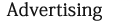
<style>
.page{position:relative;width:131px;height:22px;background:#ffffff}
.page>*{position:absolute;margin:0}
.t1{font:18px "AdobeFangsongStd-Regular";color:#151515;font-weight:bold}
</style>
<div class="page">
<p class="t1" style="left:6px;top:2px;width:96px;height:19px">Advertising</p>
</div>
